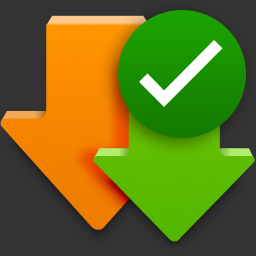
<style>
.page{position:relative;width:256px;height:256px;background:#333333}
.page>*{position:absolute;margin:0}
.t1{font:100px "GadgetRegular";color:#ffffff}
</style>
<div class="page">
<p class="t1" style="left:139px;top:40px;width:84px;height:67px">✓</p>
</div>
